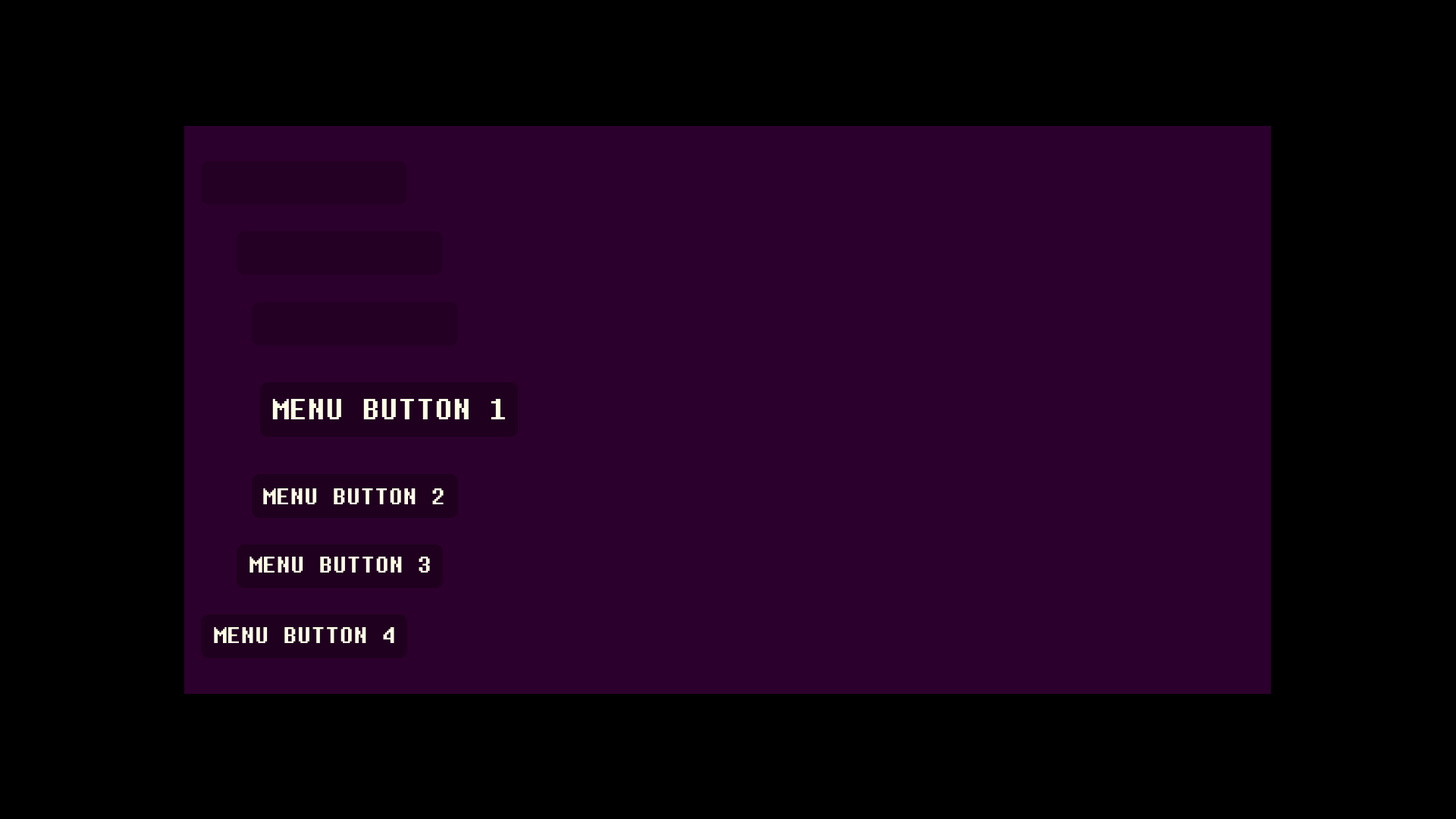
<style>
.page{position:relative;width:1456px;height:819px;background:#000000}
.page>*{position:absolute;margin:0}
.t1{font:30.3px "DeterminationMono";color:#ffffe6}
.t2{font:23.5px "DeterminationMono";color:#ffffe6}
</style>
<div class="page">
<p class="t1" style="left:272px;top:399px;width:233px;height:20px">MENU BUTTON 1</p>
<p class="t2" style="left:263px;top:488px;width:181px;height:16px">MENU BUTTON 2</p>
<p class="t2" style="left:249px;top:557px;width:181px;height:16px">MENU BUTTON 3</p>
<p class="t2" style="left:214px;top:627px;width:180px;height:16px">MENU BUTTON 4</p>
</div>
